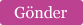
<style>
.page{position:relative;width:83px;height:25px;background:#bc4190}
.page>*{position:absolute;margin:0}
.t1{font:16px "Georgia";color:#ffffff}
</style>
<div class="page">
<p class="t1" style="left:14px;top:6px;width:53px;height:13px">Gönder</p>
</div>
